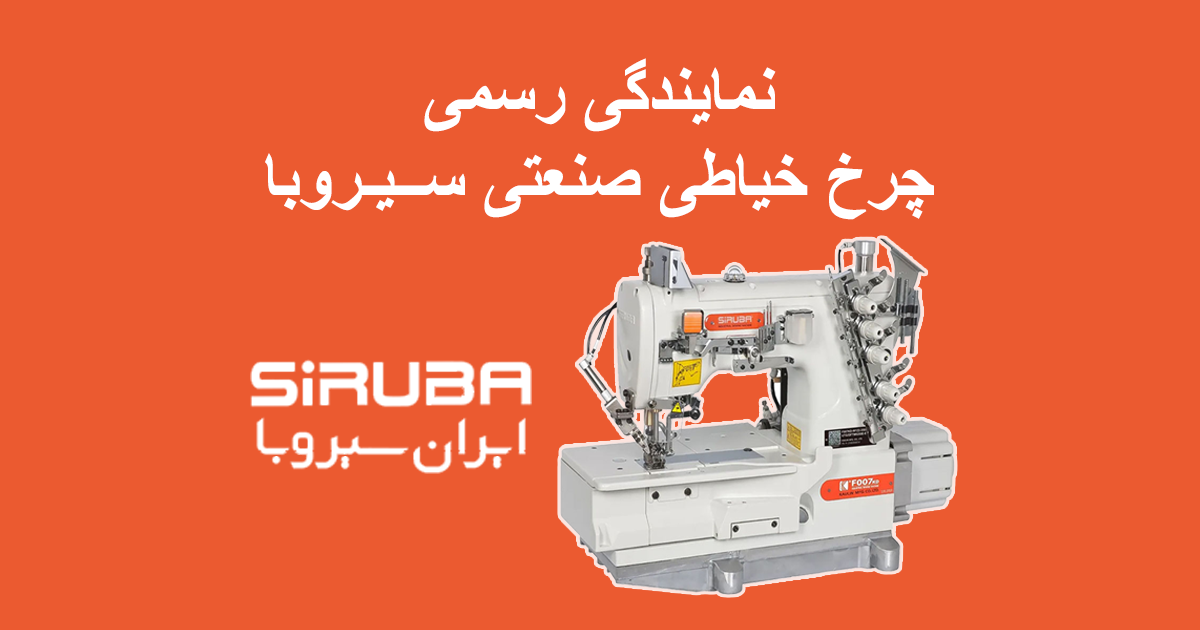
<style>
.page{position:relative;width:1200px;height:630px;background:#eb5a30}
.page>*{position:absolute;margin:0}
.t1{font:70px "Arial-BoldMT";color:#ffffff;text-transform:uppercase}
</style>
<div class="page">
<p class="t1" style="left:424px;top:58px;width:352px;height:74px">نمایندگی رسمی</p>
<p class="t1" style="left:265px;top:148px;width:669px;height:72px">چرخ خیاطی صنعتی ســیـروبا</p>
</div>
